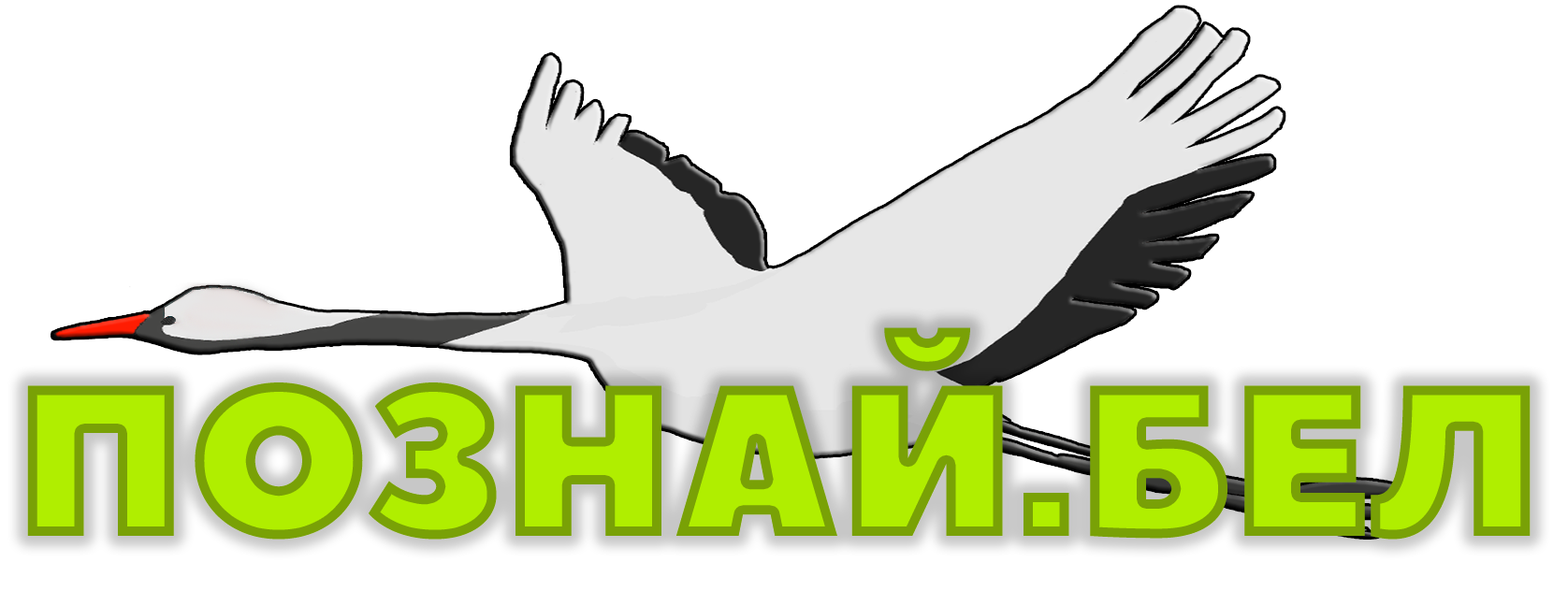
<style>
.page{position:relative;width:1568px;height:591px;background:#ffffff}
.page>*{position:absolute;margin:0}
.t1{font:214.4px "PeaceSans";color:#b0ee00}
</style>
<div class="page">
<p class="t1" style="left:27px;top:327px;width:1504px;height:213px">ПОЗНАЙ.БЕЛ</p>
</div>
